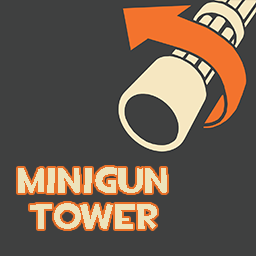
<style>
.page{position:relative;width:256px;height:256px;background:#3f4040}
.page>*{position:absolute;margin:0}
.t1{font:36px/36px "TF2Build";color:#ede3bb}
</style>
<div class="page">
<p class="t1" style="left:18px;top:167px;width:149px;height:62px;text-align:center">Minigun<br>Tower</p>
</div>
